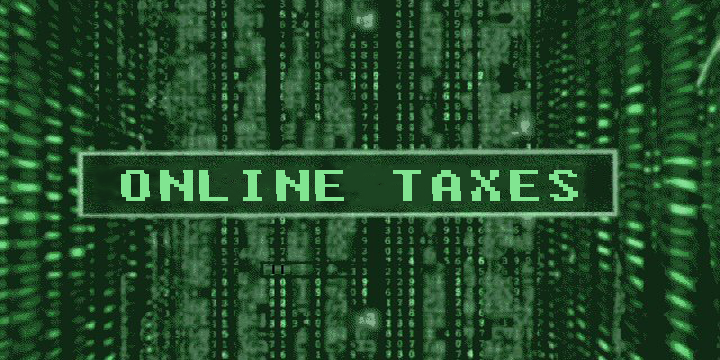
<style>
.page{position:relative;width:720px;height:360px}
.page>*{position:absolute;margin:0}
.t1{font:54px "Fixedsys";letter-spacing:0.02em;color:#81e591;scale:1.39 1}
</style>
<div class="page">
<p class="t1" style="left:121px;top:170px;width:457px;height:31px">ONLINE TAXES</p>
</div>
